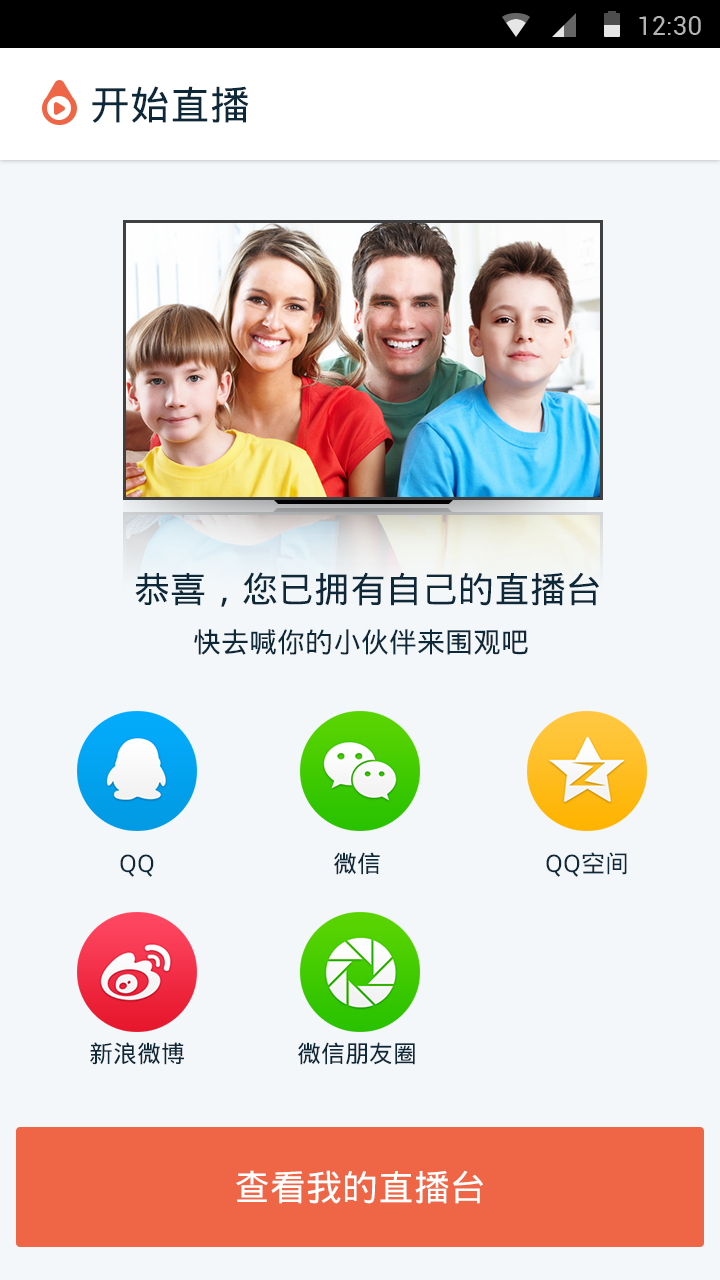
<style>
.page{position:relative;width:720px;height:1280px;background:#f4f7f9}
.page>*{position:absolute;margin:0}
.t1{font:40px "DroidSansFallback";color:#0c2839}
.t2{font:36px "DroidSansFallback";color:#0c2839}
.t3{font:28px "DroidSansFallback";color:#0c2839}
.t4{font:24px "DroidSansFallback";color:#0c2839}
.t5{font:36px "DroidSansFallback";color:#ffffff}
</style>
<div class="page">
<p class="t1" style="left:92px;top:86px;width:157px;height:37px">开始直播</p>
<p class="t2" style="left:135px;top:572px;width:464px;height:35px">恭喜，您已拥有自己的直播台</p>
<p class="t3" style="left:194px;top:629px;width:334px;height:26px">快去喊你的小伙伴来围观吧</p>
<p class="t4" style="left:120px;top:854px;width:34px;height:23px">QQ</p>
<p class="t4" style="left:334px;top:852px;width:46px;height:23px">微信</p>
<p class="t4" style="left:546px;top:852px;width:81px;height:25px">QQ空间</p>
<p class="t4" style="left:90px;top:1042px;width:94px;height:23px">新浪微博</p>
<p class="t4" style="left:298px;top:1042px;width:117px;height:23px">微信朋友圈</p>
<p class="t5" style="left:236px;top:1170px;width:247px;height:34px">查看我的直播台</p>
</div>
